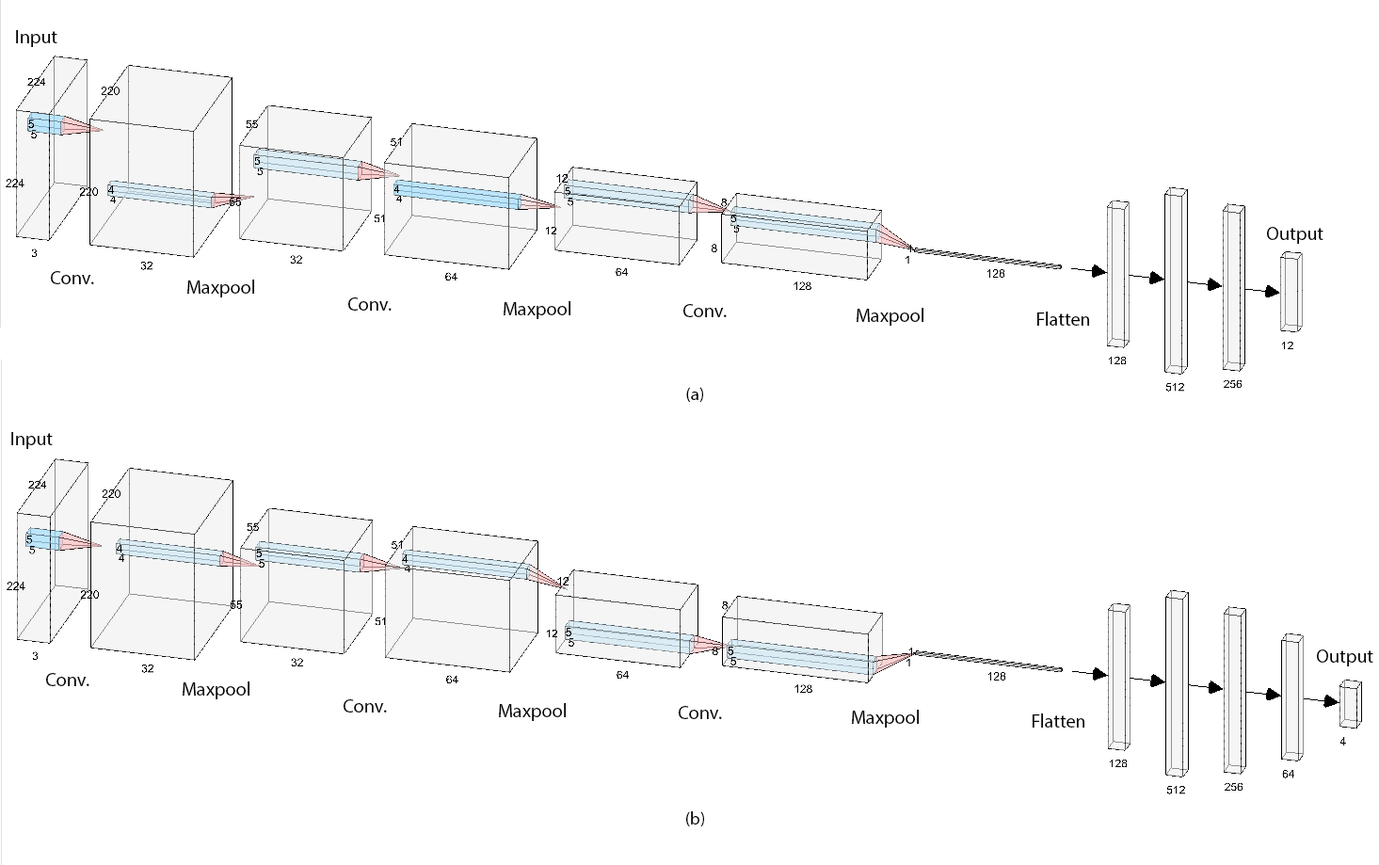
<style>
.page{position:relative;width:1379px;height:865px;background:#ffffff}
.page>*{position:absolute;margin:0}
.t1{font:19.1px "MyriadPro-Regular";color:#000000}
.t2{font:17.6px "MyriadPro-Regular";color:#000000}
</style>
<div class="page">
<p class="t1" style="left:16px;top:30px;width:41px;height:17px">Input</p>
<p class="t1" style="left:1267px;top:227px;width:56px;height:17px">Output</p>
<p class="t1" style="left:51px;top:271px;width:43px;height:13px">Conv.</p>
<p class="t1" style="left:187px;top:280px;width:67px;height:17px">Maxpool</p>
<p class="t1" style="left:348px;top:297px;width:44px;height:14px">Conv.</p>
<p class="t1" style="left:503px;top:301px;width:67px;height:18px">Maxpool</p>
<p class="t1" style="left:683px;top:304px;width:44px;height:13px">Conv.</p>
<p class="t1" style="left:856px;top:308px;width:67px;height:18px">Maxpool</p>
<p class="t1" style="left:1037px;top:312px;width:52px;height:14px">Flatten</p>
<p class="t2" style="left:686px;top:387px;width:17px;height:15px">(a)</p>
<p class="t1" style="left:11px;top:432px;width:42px;height:17px">Input</p>
<p class="t1" style="left:1317px;top:649px;width:56px;height:17px">Output</p>
<p class="t1" style="left:46px;top:673px;width:43px;height:13px">Conv.</p>
<p class="t1" style="left:183px;top:681px;width:66px;height:18px">Maxpool</p>
<p class="t1" style="left:344px;top:699px;width:43px;height:13px">Conv.</p>
<p class="t1" style="left:499px;top:703px;width:67px;height:18px">Maxpool</p>
<p class="t1" style="left:679px;top:706px;width:43px;height:13px">Conv.</p>
<p class="t1" style="left:852px;top:710px;width:67px;height:17px">Maxpool</p>
<p class="t1" style="left:1032px;top:713px;width:52px;height:14px">Flatten</p>
<p class="t2" style="left:686px;top:811px;width:18px;height:15px">(b)</p>
</div>
